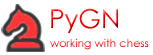
<style>
.page{position:relative;width:153px;height:55px;background:#ffffff}
.page>*{position:absolute;margin:0}
.t1{font:26px "CenturyGothic"}
.t2{font:11px "CenturyGothic"}
</style>
<div class="page">
<p class="t1" style="left:51px;top:8px;width:67px;height:25px">PyGN</p>
<p class="t2" style="left:50px;top:38px;width:99px;height:12px">working with chess</p>
</div>
